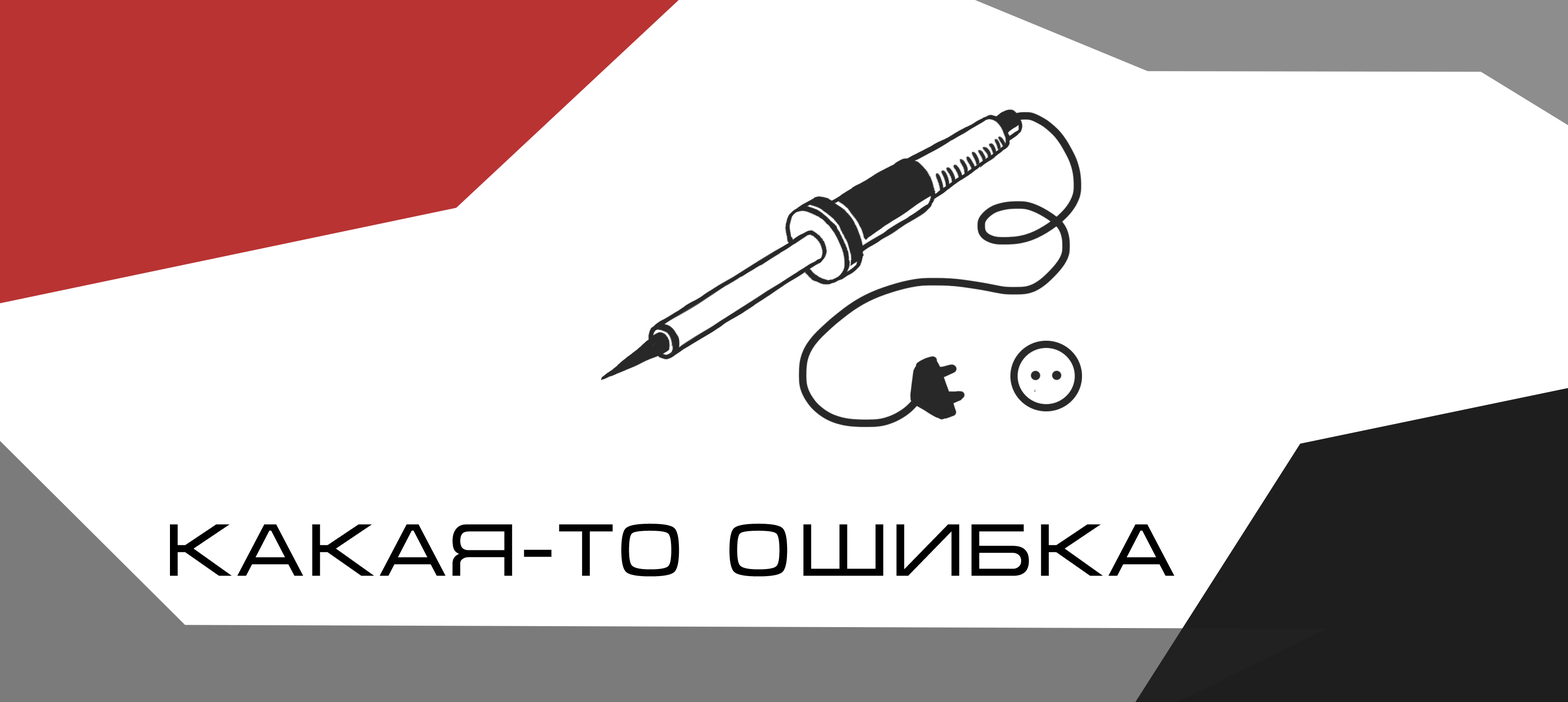
<style>
.page{position:relative;width:1568px;height:702px;background:#ffffff}
.page>*{position:absolute;margin:0}
.t1{font:74.7px "Micra";color:#000000}
</style>
<div class="page">
<p class="t1" style="left:170px;top:524px;width:1004px;height:53px">КАКАЯ-ТО ОШИБКА</p>
</div>
